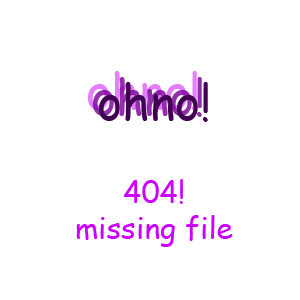
<style>
.page{position:relative;width:300px;height:300px;background:#ffffff}
.page>*{position:absolute;margin:0}
.t1{font:48px "ComicSansMS"}
.t2{font:48px "ComicSansMS";color:#9230ab}
.t3{font:48px "ComicSansMS";color:#410351}
.t4{font:30px "ComicSansMS";color:#cc00ff}
</style>
<div class="page">
<p class="t1" style="left:87px;top:71px;width:110px;height:40px">ohno!</p>
<p class="t2" style="left:92px;top:77px;width:110px;height:40px">ohno!</p>
<p class="t3" style="left:98px;top:82px;width:110px;height:40px">ohno!</p>
<p class="t4" style="left:76px;top:179px;width:157px;height:68px;text-align:center">404!<br>missing file</p>
</div>
